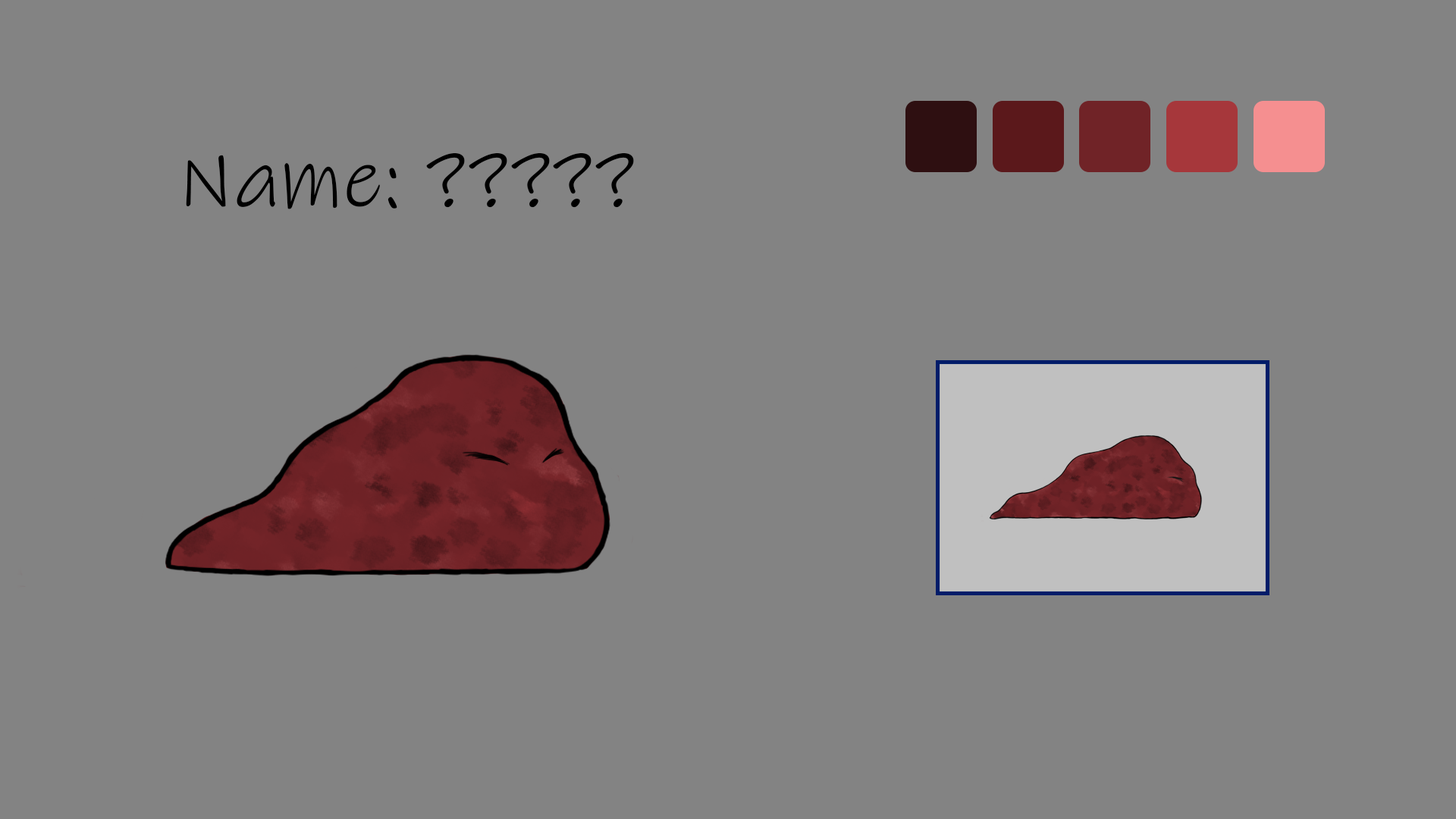
<style>
.page{position:relative;width:1456px;height:819px;background:#838383}
.page>*{position:absolute;margin:0}
.t1{font:84.9px "InkFree";color:#000000}
</style>
<div class="page">
<p class="t1" style="left:186px;top:153px;width:448px;height:56px">Name: ?????</p>
</div>
